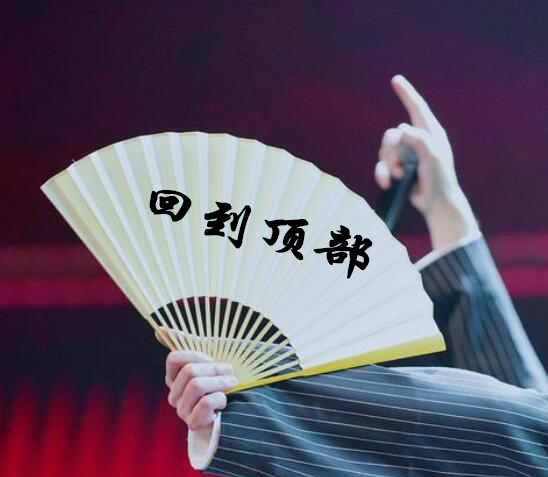
<style>
.page{position:relative;width:548px;height:477px}
.page>*{position:absolute;margin:0}
.t1{font:51.6px "STXingkai";letter-spacing:-0.02em;color:#000000;font-weight:bold;scale:1.14 1}
</style>
<div class="page">
<p class="t1" style="left:149px;top:190px;width:224px;height:89px;rotate:15deg">回到顶部</p>
</div>
